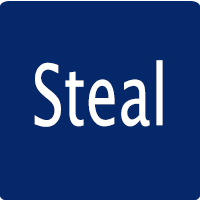
<style>
.page{position:relative;width:200px;height:200px;background:#05286b}
.page>*{position:absolute;margin:0}
.t1{font:84px "LucidaSansUnicode";color:#fffffd;scale:0.7 1}
</style>
<div class="page">
<p class="t1" style="left:34px;top:60px;width:129px;height:67px">Steal</p>
</div>
